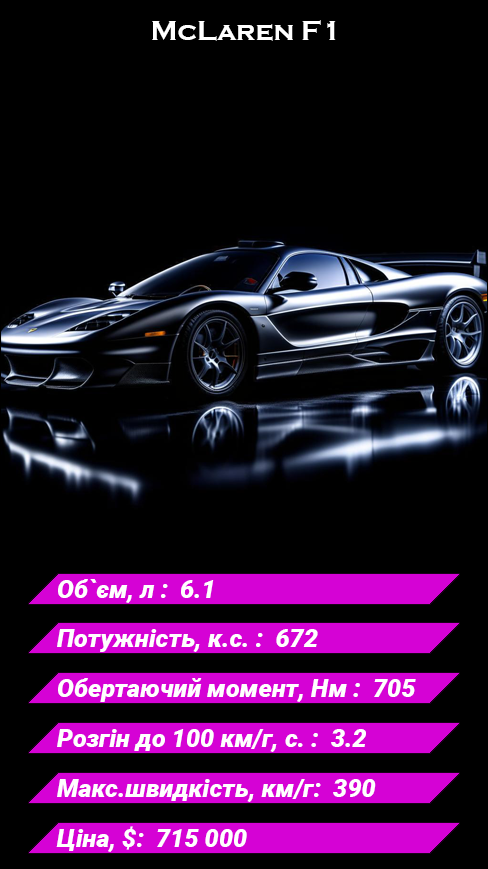
<style>
.page{position:relative;width:488px;height:869px;background:#000000}
.page>*{position:absolute;margin:0}
.t1{font:28px "CopperplateGothic-Bold";color:#ffffff}
.t2{font:25px "Roboto-BlackItalic";color:#ffffff}
</style>
<div class="page">
<p class="t1" style="left:152px;top:20px;width:184px;height:21px">McLaren F1</p>
<p class="t2" style="left:58px;top:579px;width:156px;height:24px">Об`єм, л :  6.1</p>
<p class="t2" style="left:57px;top:629px;width:261px;height:23px">Потужність, к.с. :  672</p>
<p class="t2" style="left:58px;top:678px;width:358px;height:24px">Обертаючий момент, Нм :  705</p>
<p class="t2" style="left:57px;top:729px;width:309px;height:23px">Розгін до 100 км/г, с. :  3.2</p>
<p class="t2" style="left:57px;top:779px;width:319px;height:23px">Макс.швидкість, км/г:  390</p>
<p class="t2" style="left:56px;top:826px;width:191px;height:26px">Ціна, $:  715 000</p>
</div>
